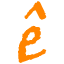
<style>
.page{position:relative;width:64px;height:64px;background:#ffffff}
.page>*{position:absolute;margin:0}
.t1{font:72px "VinerHandITC";color:#ff8400;scale:0.94 1}
</style>
<div class="page">
<p class="t1" style="left:18px;top:1px;width:29px;height:62px">ê</p>
</div>
